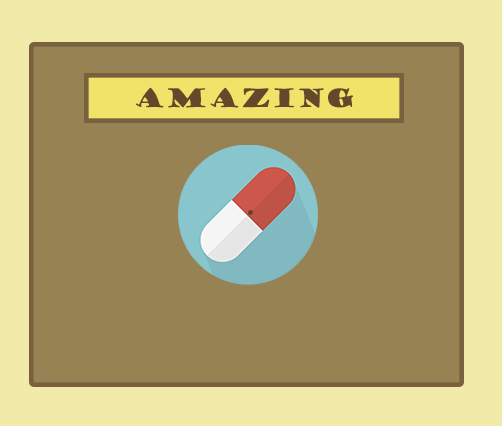
<style>
.page{position:relative;width:502px;height:426px;background:#978254}
.page>*{position:absolute;margin:0}
.t1{font:25px "GoudyStout";color:#62492c}
</style>
<div class="page">
<p class="t1" style="left:135px;top:87px;width:218px;height:21px">amazing</p>
</div>
